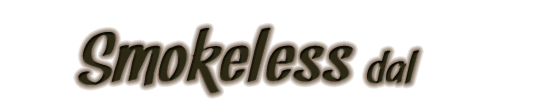
<style>
.page{position:relative;width:552px;height:112px;background:#ffffff}
.page>*{position:absolute;margin:0}
.t1{font:72px "Snickles";letter-spacing:0.025em;color:#2c2813;scale:1.2 1}
.t2{font:44px "Snickles";letter-spacing:0.025em;color:#2c2813;scale:1.2 1}
</style>
<div class="page">
<p class="t1" style="left:78px;top:27px;width:341px;height:67px">Smokeless<span class="t2"> dal</span></p>
</div>
